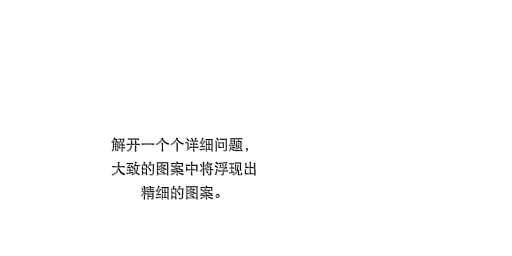
<style>
.page{position:relative;width:512px;height:256px;background:#ffffff}
.page>*{position:absolute;margin:0}
.t1{font:14.7px/24px "DFPHeiW5-GB"}
</style>
<div class="page">
<p class="t1" style="left:111px;top:137px;width:145px;height:63px;text-align:center">解开一个个详细问题，<br>大致的图案中将浮现出<br>精细的图案。</p>
</div>
